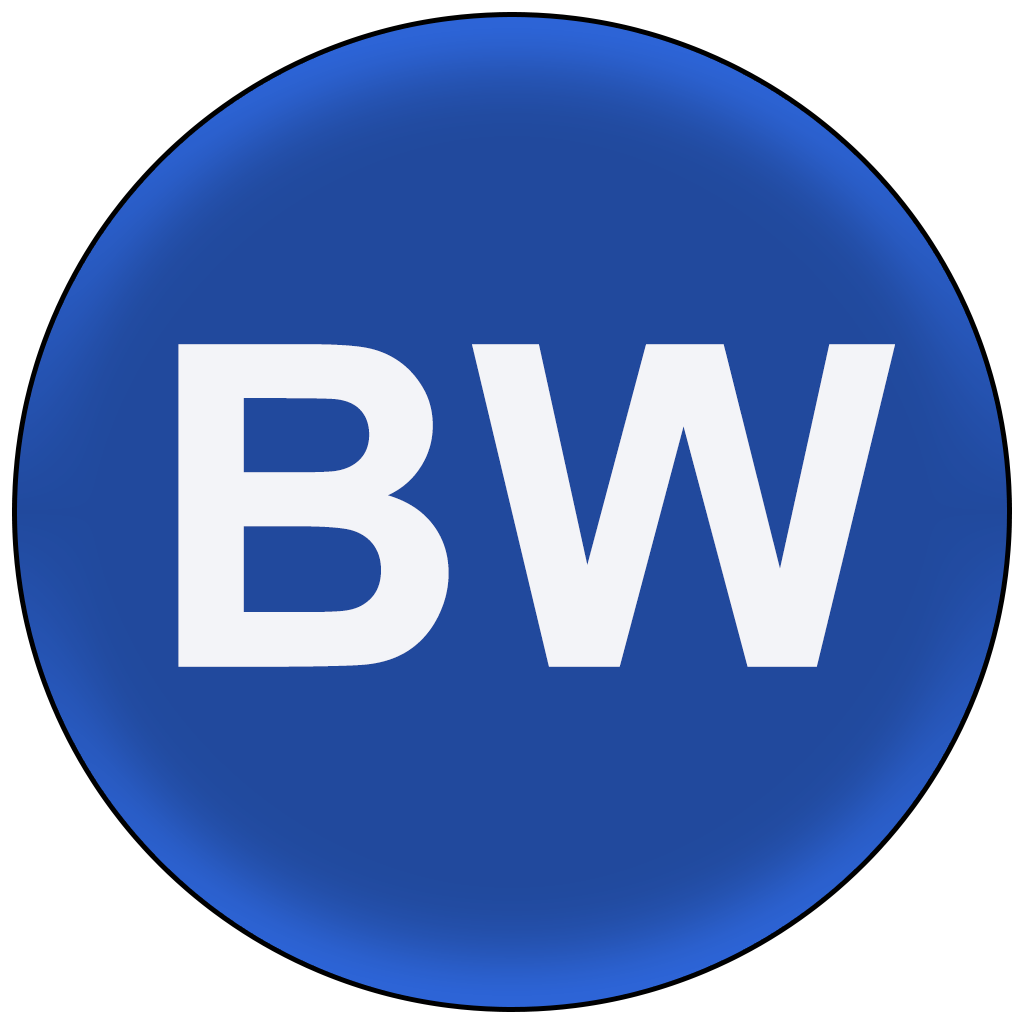
<style>
.page{position:relative;width:1024px;height:1024px;background:#21499d}
.page>*{position:absolute;margin:0}
.t1{font:450px "Arial-BoldMT";color:#f3f4f8}
</style>
<div class="page">
<p class="t1" style="left:178px;top:344px;width:717px;height:323px">BW</p>
</div>
